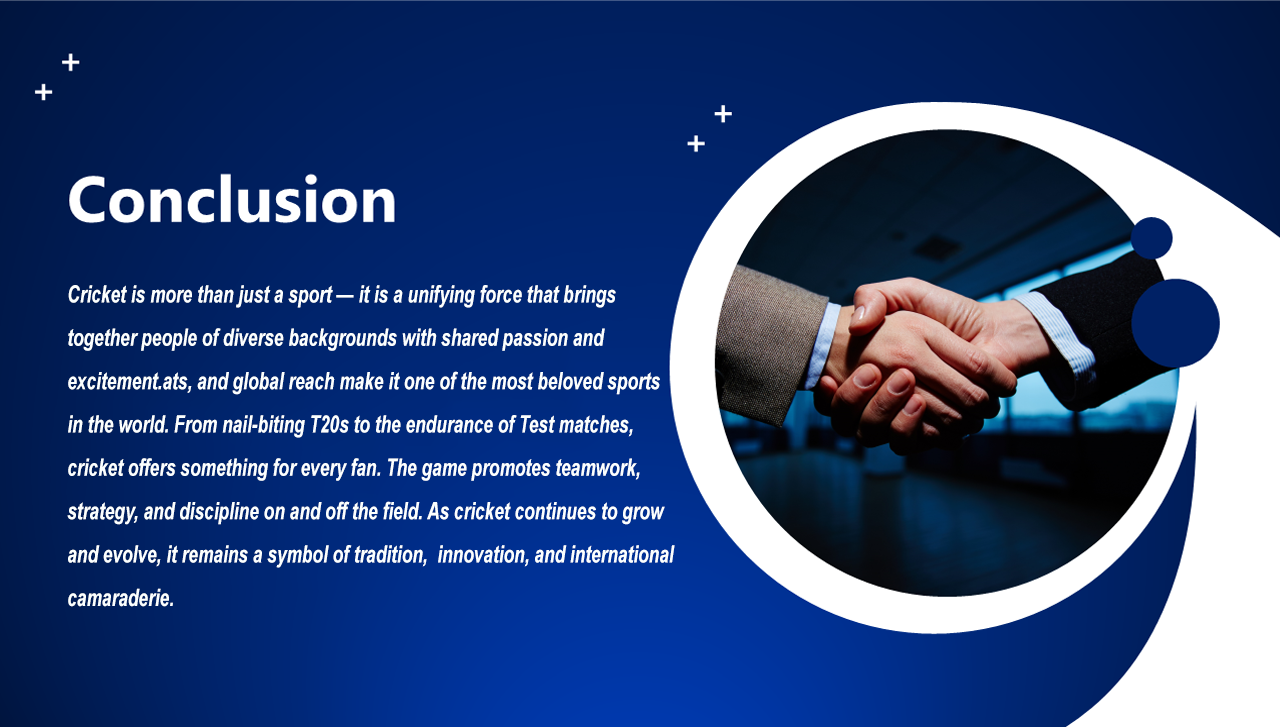
<style>
.page{position:relative;width:1280px;height:727px}
.page>*{position:absolute;margin:0}
.t1{font:24px/43.4px "Arial-BoldItalicMT";color:#fbffff;scale:0.72 1}
</style>
<div class="page">
<p class="t1" style="left:67px;top:285px;width:608px;height:322px">Cricket is more than just a sport — it is a unifying force that brings <br>together people of diverse backgrounds with shared passion and <br>excitement.ats, and global reach make it one of the most beloved sports<br>in the world. From nail-biting T20s to the endurance of Test matches, <br>cricket offers something for every fan. The game promotes teamwork,<br>strategy, and discipline on and off the field. As cricket continues to grow<br>and evolve, it remains a symbol of tradition,  innovation, and international <br>camaraderie.</p>
</div>
